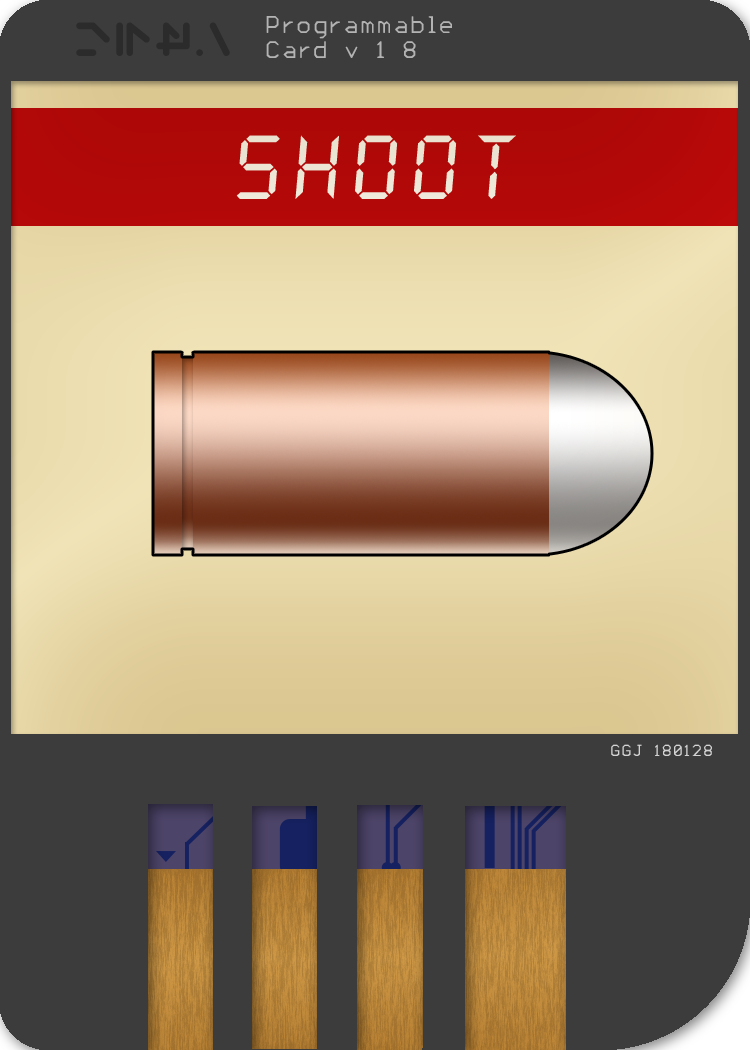
<style>
.page{position:relative;width:750px;height:1050px;background:#3d3c3c}
.page>*{position:absolute;margin:0}
.t1{font:25px/25px "Litt";letter-spacing:0.1em;color:#b3b3b3}
.t2{font:50px "Silver";letter-spacing:0.1em;color:#2b2b2b}
.t3{font:100px "DS-Digital-Italic";letter-spacing:0.1em;color:#ece5d3}
.t4{font:16.7px "Litt";letter-spacing:0.1em;color:#d3d3d3}
</style>
<div class="page">
<p class="t1" style="left:266px;top:16px;width:186px;height:42px">Programmable<br>Card v.1.8</p>
<p class="t2" style="left:76px;top:22px;width:154px;height:34px">lopy</p>
<p class="t3" style="left:236px;top:135px;width:280px;height:64px">SHOOT</p>
<p class="t4" style="left:611px;top:744px;width:101px;height:12px">GGJ-180128</p>
</div>
